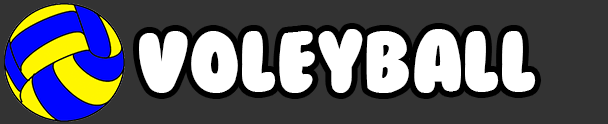
<style>
.page{position:relative;width:608px;height:124px;background:#333333}
.page>*{position:absolute;margin:0}
.t1{font:80px "BubbleGum";color:#ffffff}
</style>
<div class="page">
<p class="t1" style="left:139px;top:29px;width:397px;height:64px">Voleyball</p>
</div>
